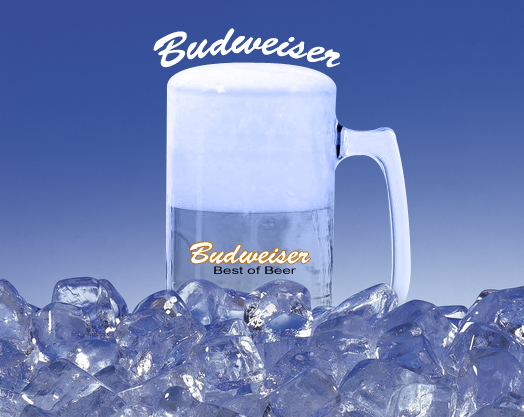
<style>
.page{position:relative;width:524px;height:417px}
.page>*{position:absolute;margin:0}
.t1{font:42.3px "BrushScriptStd";color:#ffffff}
.t2{font:30px "BrushScriptStd";color:#ffffff}
.t3{font:10.2px "ArialMT";color:#000000;scale:1.47 1}
</style>
<div class="page">
<p class="t1" style="left:153px;top:28px;width:187px;height:40px">Budweiser</p>
<p class="t2" style="left:190px;top:242px;width:120px;height:22px">Budweiser</p>
<p class="t3" style="left:214px;top:266px;width:82px;height:8px">Best of Beer</p>
</div>
